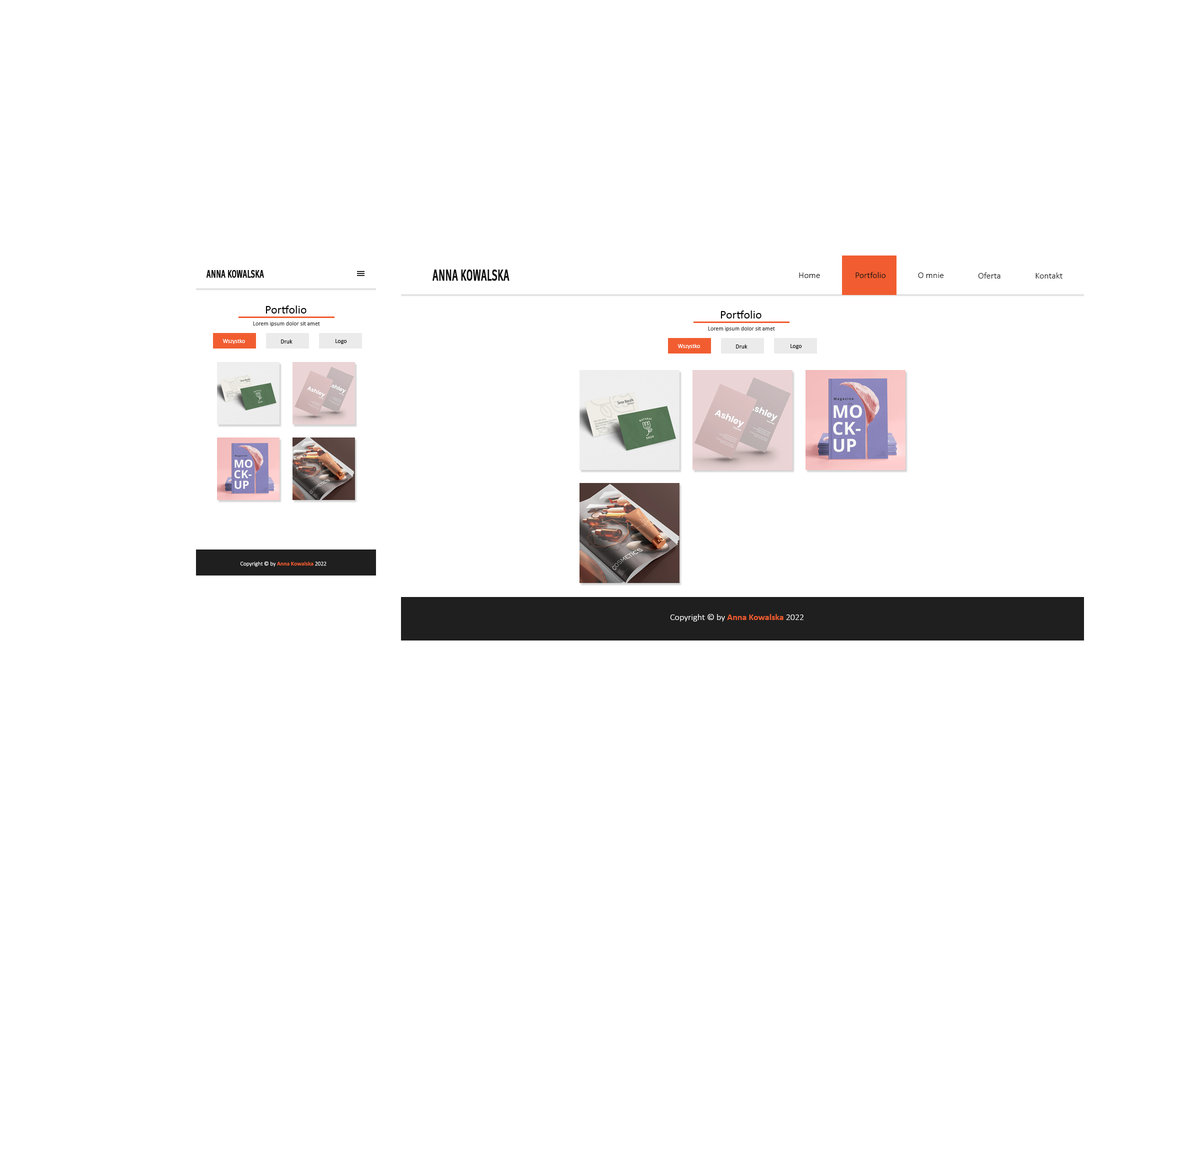
<style>
.page{position:relative;width:1195px;height:1152px;background:#ffffff}
.page>*{position:absolute;margin:0}
.t1{font:11.2px "ArtifaktElement-Bold";letter-spacing:-0.01em;color:#111111;font-weight:bold;scale:0.6 1}
.t2{font:15px "ArtifaktElement-Bold";letter-spacing:-0.01em;color:#111111;font-weight:bold;scale:0.6 1}
.t3{font:9px "Calibri-Light";color:#111111}
.t4{font:12px "Calibri";color:#000000}
.t5{font:6px "Calibri";color:#363636}
.t6{font:6px "Calibri";color:#ffffff}
.t7{font:6px "Calibri";color:#000000}
.t8{font:5.8px "Calibri-Light";color:#ffffff}
.t9{font:5.8px "Calibri-Bold";color:#f15d30}
.t10{font:9px "Calibri-Light";color:#ffffff}
.t11{font:9px "Calibri-Bold";color:#f15d30}
</style>
<div class="page">
<p class="t1" style="left:206px;top:270px;width:58px;height:8px">ANNA KOWALSKA</p>
<p class="t2" style="left:432px;top:270px;width:78px;height:11px">ANNA KOWALSKA</p>
<p class="t3" style="left:799px;top:272px;width:21px;height:6px">Home</p>
<p class="t3" style="left:856px;top:272px;width:30px;height:6px">Portfolio</p>
<p class="t3" style="left:918px;top:272px;width:26px;height:6px">O mnie</p>
<p class="t3" style="left:978px;top:272px;width:22px;height:6px">Oferta</p>
<p class="t3" style="left:1036px;top:272px;width:26px;height:6px">Kontakt</p>
<p class="t4" style="left:266px;top:306px;width:40px;height:8px">Portfolio</p>
<p class="t4" style="left:720px;top:310px;width:42px;height:8px">Portfolio</p>
<p class="t5" style="left:253px;top:322px;width:67px;height:4px">Lorem ipsum dolor sit amet</p>
<p class="t5" style="left:708px;top:326px;width:67px;height:6px">Lorem ipsum dolor sit amet</p>
<p class="t6" style="left:222px;top:339px;width:23px;height:5px">Wszystko</p>
<p class="t7" style="left:281px;top:340px;width:11px;height:4px">Druk</p>
<p class="t7" style="left:336px;top:339px;width:11px;height:5px">Logo</p>
<p class="t6" style="left:678px;top:344px;width:22px;height:5px">Wszystko</p>
<p class="t7" style="left:736px;top:344px;width:12px;height:4px">Druk</p>
<p class="t7" style="left:790px;top:344px;width:12px;height:5px">Logo</p>
<p class="t8" style="left:240px;top:562px;width:86px;height:5px">Copyright © by <span class="t9">Anna Kowalska</span> 2022</p>
<p class="t10" style="left:670px;top:614px;width:134px;height:8px">Copyright © by <span class="t11">Anna Kowalska</span> 2022</p>
</div>
